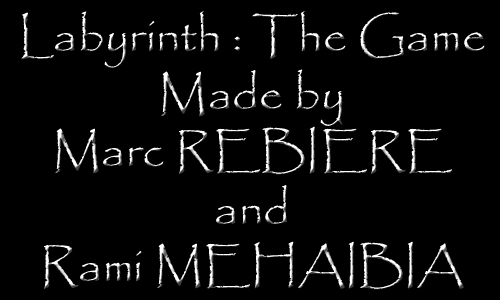
<style>
.page{position:relative;width:500px;height:300px;background:#000000}
.page>*{position:absolute;margin:0}
.t1{font:48px "Papyrus-Regular"}
</style>
<div class="page">
<p class="t1" style="left:21px;top:11px;width:464px;height:279px;text-align:center">Labyrinth : The Game<br>Made by<br>Marc REBIÈRE<br>and<br>Rami MEHAIBIA</p>
</div>
